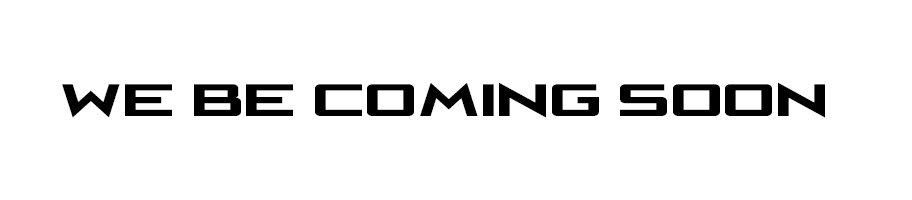
<style>
.page{position:relative;width:912px;height:200px;background:#ffffff}
.page>*{position:absolute;margin:0}
.t1{font:42px "CafeNeroM54";letter-spacing:0.025em;color:#000000;scale:1.43 1}
</style>
<div class="page">
<p class="t1" style="left:62px;top:82px;width:763px;height:36px">We be coming soon</p>
</div>
